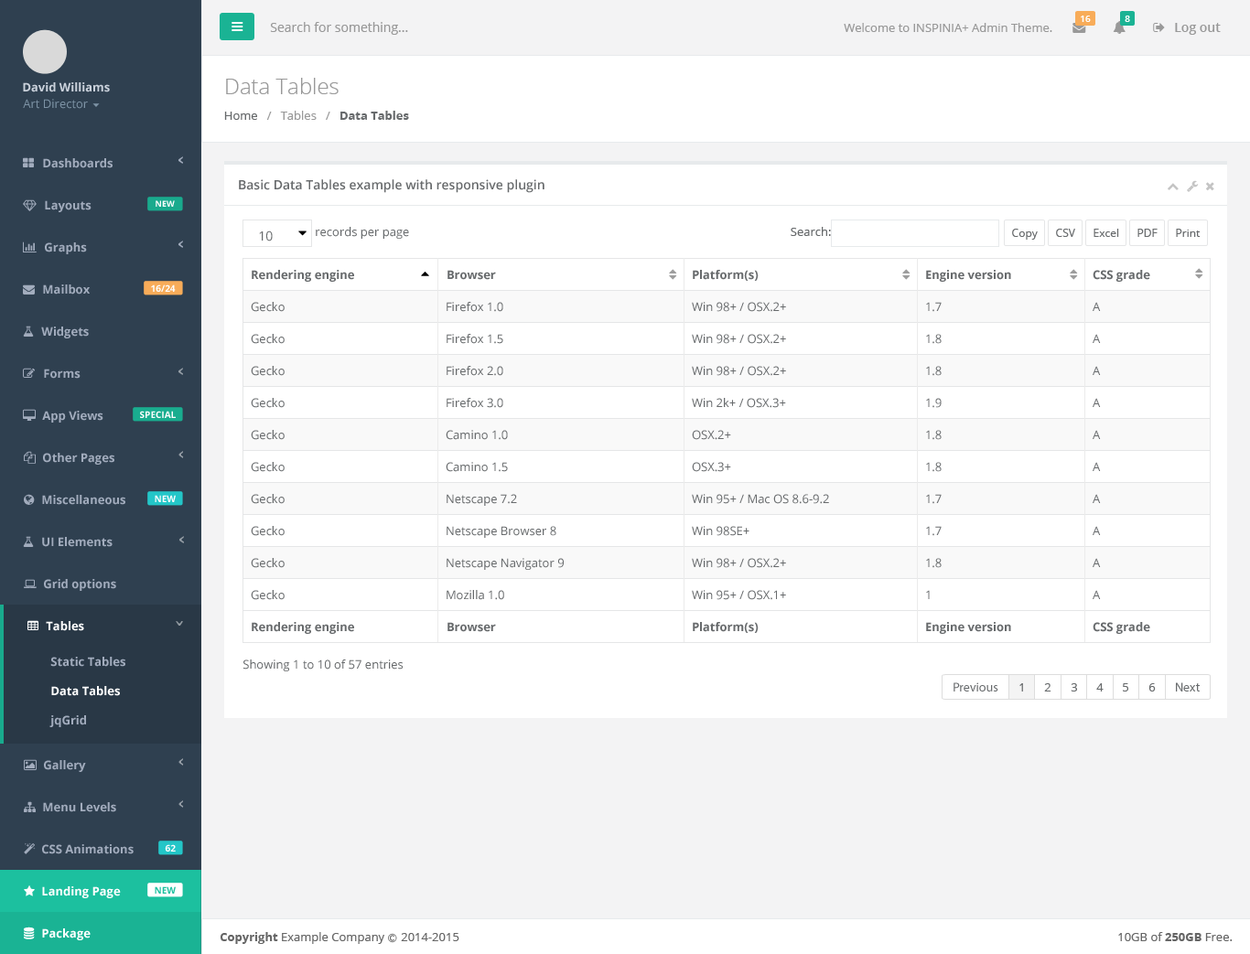
<style>
.page{position:relative;width:1250px;height:954px;background:#ffffff}
.page>*{position:absolute;margin:0}
.t1{font:9.1px "OpenSans-Semibold";color:#ffffff}
.t2{font:12.8px "OpenSans";color:#999999}
.t3{font:11.9px "OpenSans";color:#999999}
.t4{font:12.8px "OpenSans-Semibold";color:#999999}
.t5{font:22px "OpenSans-Light";color:#999999}
.t6{font:11.9px "OpenSans-Bold";color:#cad1db}
.t7{font:11.9px "OpenSans";color:#7d93a5}
.t8{font:11.9px "OpenSans";color:#676a6c}
.t9{font:11.9px "OpenSans-Bold";color:#676a6c}
.t10{font:11.9px "OpenSans-Bold";color:#a2acbd}
.t11{font:12.8px "OpenSans-Semibold";color:#676a6c}
.t12{font:8.2px "OpenSans-Bold";color:#fefefe}
.t13{font:12.8px "OpenSans";color:#676a6c}
.t14{font:11px "OpenSans";color:#676a6c}
.t15{font:9.1px "OpenSans-Bold";color:#fefefe}
.t16{font:11.9px "OpenSans-Bold";color:#ffffff}
.t17{font:12.8px "MyriadPro-Regular";color:#676a6c}
.t18{font:9.1px "OpenSans-Bold";color:#1cc09f}
.t19{font:11.9px "OpenSans";color:#666666}
.t20{font:11.9px "OpenSans-Bold";color:#666666}
.t21{font:9.1px "Meiryo";color:#666666}
</style>
<div class="page">
<p class="t1" style="left:1080px;top:16px;width:11px;height:6px">16</p>
<p class="t1" style="left:1124px;top:16px;width:6px;height:6px">8</p>
<p class="t2" style="left:270px;top:22px;width:138px;height:13px">Search for something...</p>
<p class="t3" style="left:843px;top:23px;width:209px;height:9px">Welcome to INSPINIA+ Admin Theme.</p>
<p class="t4" style="left:1175px;top:23px;width:45px;height:12px">Log out</p>
<p class="t5" style="left:226px;top:78px;width:112px;height:16px">Data Tables</p>
<p class="t6" style="left:23px;top:82px;width:87px;height:10px">David Williams</p>
<p class="t7" style="left:23px;top:99px;width:65px;height:10px">Art Director</p>
<p class="t3" style="left:224px;top:111px;width:185px;height:9px"><span class="t8">Home</span>   /   Tables   / <span class="t9">  Data Tables</span></p>
<p class="t10" style="left:43px;top:158px;width:70px;height:10px">Dashboards</p>
<p class="t11" style="left:239px;top:179px;width:305px;height:14px">Basic Data Tables example with responsive plugin</p>
<p class="t10" style="left:45px;top:200px;width:46px;height:12px">Layouts</p>
<p class="t12" style="left:156px;top:200px;width:19px;height:7px">NEW</p>
<p class="t13" style="left:259px;top:231px;width:14px;height:11px">10</p>
<p class="t8" style="left:316px;top:227px;width:93px;height:12px">records per page</p>
<p class="t8" style="left:790px;top:227px;width:41px;height:9px">Search:</p>
<p class="t14" style="left:1012px;top:229px;width:25px;height:11px">Copy</p>
<p class="t14" style="left:1056px;top:229px;width:19px;height:8px">CSV</p>
<p class="t14" style="left:1093px;top:229px;width:26px;height:8px">Excel</p>
<p class="t14" style="left:1137px;top:229px;width:20px;height:8px">PDF</p>
<p class="t14" style="left:1176px;top:229px;width:24px;height:8px">Print</p>
<p class="t10" style="left:45px;top:242px;width:42px;height:12px">Graphs</p>
<p class="t9" style="left:252px;top:270px;width:102px;height:12px">Rendering engine</p>
<p class="t9" style="left:447px;top:270px;width:49px;height:10px">Browser</p>
<p class="t9" style="left:693px;top:270px;width:65px;height:11px">Platform(s)</p>
<p class="t9" style="left:926px;top:270px;width:85px;height:12px">Engine version</p>
<p class="t9" style="left:1092px;top:270px;width:58px;height:12px">CSS grade</p>
<p class="t10" style="left:43px;top:285px;width:47px;height:10px">Mailbox</p>
<p class="t15" style="left:151px;top:285px;width:25px;height:7px">16/24</p>
<p class="t8" style="left:251px;top:302px;width:34px;height:10px">Gecko</p>
<p class="t8" style="left:446px;top:302px;width:57px;height:10px">Firefox 1.0</p>
<p class="t8" style="left:692px;top:302px;width:94px;height:10px">Win 98+ / OSX.2+</p>
<p class="t8" style="left:926px;top:302px;width:15px;height:10px">1.7</p>
<p class="t8" style="left:1092px;top:302px;width:9px;height:9px">A</p>
<p class="t10" style="left:41px;top:327px;width:48px;height:11px">Widgets</p>
<p class="t8" style="left:251px;top:334px;width:34px;height:10px">Gecko</p>
<p class="t8" style="left:446px;top:334px;width:57px;height:10px">Firefox 1.5</p>
<p class="t8" style="left:692px;top:334px;width:94px;height:10px">Win 98+ / OSX.2+</p>
<p class="t8" style="left:926px;top:334px;width:15px;height:10px">1.8</p>
<p class="t8" style="left:1092px;top:334px;width:9px;height:9px">A</p>
<p class="t8" style="left:251px;top:366px;width:34px;height:10px">Gecko</p>
<p class="t8" style="left:446px;top:366px;width:57px;height:10px">Firefox 2.0</p>
<p class="t8" style="left:692px;top:366px;width:94px;height:10px">Win 98+ / OSX.2+</p>
<p class="t8" style="left:926px;top:366px;width:15px;height:10px">1.8</p>
<p class="t8" style="left:1092px;top:366px;width:9px;height:9px">A</p>
<p class="t10" style="left:44px;top:369px;width:37px;height:10px">Forms</p>
<p class="t8" style="left:251px;top:398px;width:34px;height:10px">Gecko</p>
<p class="t8" style="left:446px;top:398px;width:57px;height:10px">Firefox 3.0</p>
<p class="t8" style="left:692px;top:398px;width:94px;height:10px">Win 2k+ / OSX.3+</p>
<p class="t8" style="left:926px;top:398px;width:15px;height:10px">1.9</p>
<p class="t8" style="left:1092px;top:398px;width:9px;height:9px">A</p>
<p class="t10" style="left:42px;top:411px;width:61px;height:12px">App Views</p>
<p class="t15" style="left:140px;top:411px;width:36px;height:7px">SPECIAL</p>
<p class="t8" style="left:251px;top:430px;width:34px;height:10px">Gecko</p>
<p class="t8" style="left:446px;top:430px;width:62px;height:10px">Camino 1.0</p>
<p class="t8" style="left:692px;top:430px;width:39px;height:10px">OSX.2+</p>
<p class="t8" style="left:926px;top:430px;width:15px;height:10px">1.8</p>
<p class="t8" style="left:1092px;top:430px;width:9px;height:9px">A</p>
<p class="t10" style="left:43px;top:453px;width:71px;height:12px">Other Pages</p>
<p class="t8" style="left:251px;top:462px;width:34px;height:10px">Gecko</p>
<p class="t8" style="left:446px;top:462px;width:62px;height:10px">Camino 1.5</p>
<p class="t8" style="left:692px;top:462px;width:39px;height:10px">OSX.3+</p>
<p class="t8" style="left:926px;top:462px;width:15px;height:10px">1.8</p>
<p class="t8" style="left:1092px;top:462px;width:9px;height:9px">A</p>
<p class="t10" style="left:42px;top:495px;width:83px;height:10px">Miscellaneous</p>
<p class="t15" style="left:155px;top:495px;width:21px;height:7px">NEW</p>
<p class="t8" style="left:251px;top:494px;width:34px;height:10px">Gecko</p>
<p class="t8" style="left:446px;top:494px;width:71px;height:12px">Netscape 7.2</p>
<p class="t8" style="left:692px;top:494px;width:137px;height:10px">Win 95+ / Mac OS 8.6-9.2</p>
<p class="t8" style="left:926px;top:494px;width:15px;height:10px">1.7</p>
<p class="t8" style="left:1092px;top:494px;width:9px;height:9px">A</p>
<p class="t8" style="left:251px;top:526px;width:34px;height:10px">Gecko</p>
<p class="t8" style="left:446px;top:526px;width:110px;height:12px">Netscape Browser 8</p>
<p class="t8" style="left:692px;top:526px;width:57px;height:10px">Win 98SE+</p>
<p class="t8" style="left:926px;top:526px;width:15px;height:10px">1.7</p>
<p class="t8" style="left:1092px;top:526px;width:9px;height:9px">A</p>
<p class="t10" style="left:42px;top:537px;width:71px;height:10px">UI Elements</p>
<p class="t8" style="left:251px;top:558px;width:34px;height:10px">Gecko</p>
<p class="t8" style="left:446px;top:558px;width:118px;height:12px">Netscape Navigator 9</p>
<p class="t8" style="left:692px;top:558px;width:94px;height:10px">Win 98+ / OSX.2+</p>
<p class="t8" style="left:926px;top:558px;width:15px;height:10px">1.8</p>
<p class="t8" style="left:1092px;top:558px;width:9px;height:9px">A</p>
<p class="t10" style="left:44px;top:579px;width:72px;height:12px">Grid options</p>
<p class="t8" style="left:251px;top:590px;width:34px;height:10px">Gecko</p>
<p class="t8" style="left:446px;top:590px;width:58px;height:10px">Mozilla 1.0</p>
<p class="t8" style="left:692px;top:590px;width:94px;height:10px">Win 95+ / OSX.1+</p>
<p class="t8" style="left:926px;top:590px;width:3px;height:9px">1</p>
<p class="t8" style="left:1092px;top:590px;width:9px;height:9px">A</p>
<p class="t16" style="left:46px;top:621px;width:38px;height:10px">Tables</p>
<p class="t9" style="left:252px;top:622px;width:102px;height:12px">Rendering engine</p>
<p class="t9" style="left:447px;top:622px;width:49px;height:10px">Browser</p>
<p class="t9" style="left:693px;top:622px;width:65px;height:11px">Platform(s)</p>
<p class="t9" style="left:926px;top:622px;width:85px;height:12px">Engine version</p>
<p class="t9" style="left:1092px;top:622px;width:58px;height:12px">CSS grade</p>
<p class="t10" style="left:50px;top:657px;width:75px;height:10px">Static Tables</p>
<p class="t8" style="left:243px;top:660px;width:160px;height:11px">Showing 1 to 10 of 57 entries</p>
<p class="t16" style="left:51px;top:686px;width:69px;height:10px">Data Tables</p>
<p class="t17" style="left:953px;top:682px;width:45px;height:10px">Previous</p>
<p class="t8" style="left:1019px;top:683px;width:4px;height:9px">1</p>
<p class="t8" style="left:1044px;top:683px;width:7px;height:9px">2</p>
<p class="t8" style="left:1070px;top:683px;width:7px;height:9px">3</p>
<p class="t8" style="left:1096px;top:683px;width:7px;height:9px">4</p>
<p class="t8" style="left:1123px;top:683px;width:5px;height:9px">5</p>
<p class="t8" style="left:1148px;top:683px;width:7px;height:9px">6</p>
<p class="t17" style="left:1176px;top:682px;width:23px;height:10px">Next</p>
<p class="t10" style="left:49px;top:715px;width:37px;height:12px">jqGrid</p>
<p class="t10" style="left:44px;top:760px;width:42px;height:12px">Gallery</p>
<p class="t10" style="left:43px;top:802px;width:73px;height:10px">Menu Levels</p>
<p class="t10" style="left:42px;top:844px;width:92px;height:10px">CSS Animations</p>
<p class="t15" style="left:165px;top:844px;width:11px;height:8px">62</p>
<p class="t16" style="left:42px;top:886px;width:79px;height:12px">Landing Page</p>
<p class="t18" style="left:155px;top:886px;width:21px;height:8px">NEW</p>
<p class="t16" style="left:42px;top:929px;width:49px;height:11px">Package</p>
<p class="t19" style="left:220px;top:932px;width:239px;height:12px"><span class="t20">Copyright</span> Example Company <span class="t21">Ⓒ </span>2014-2015</p>
<p class="t19" style="left:1118px;top:932px;width:114px;height:9px">10GB of <span class="t20">250GB</span> Free.</p>
</div>
